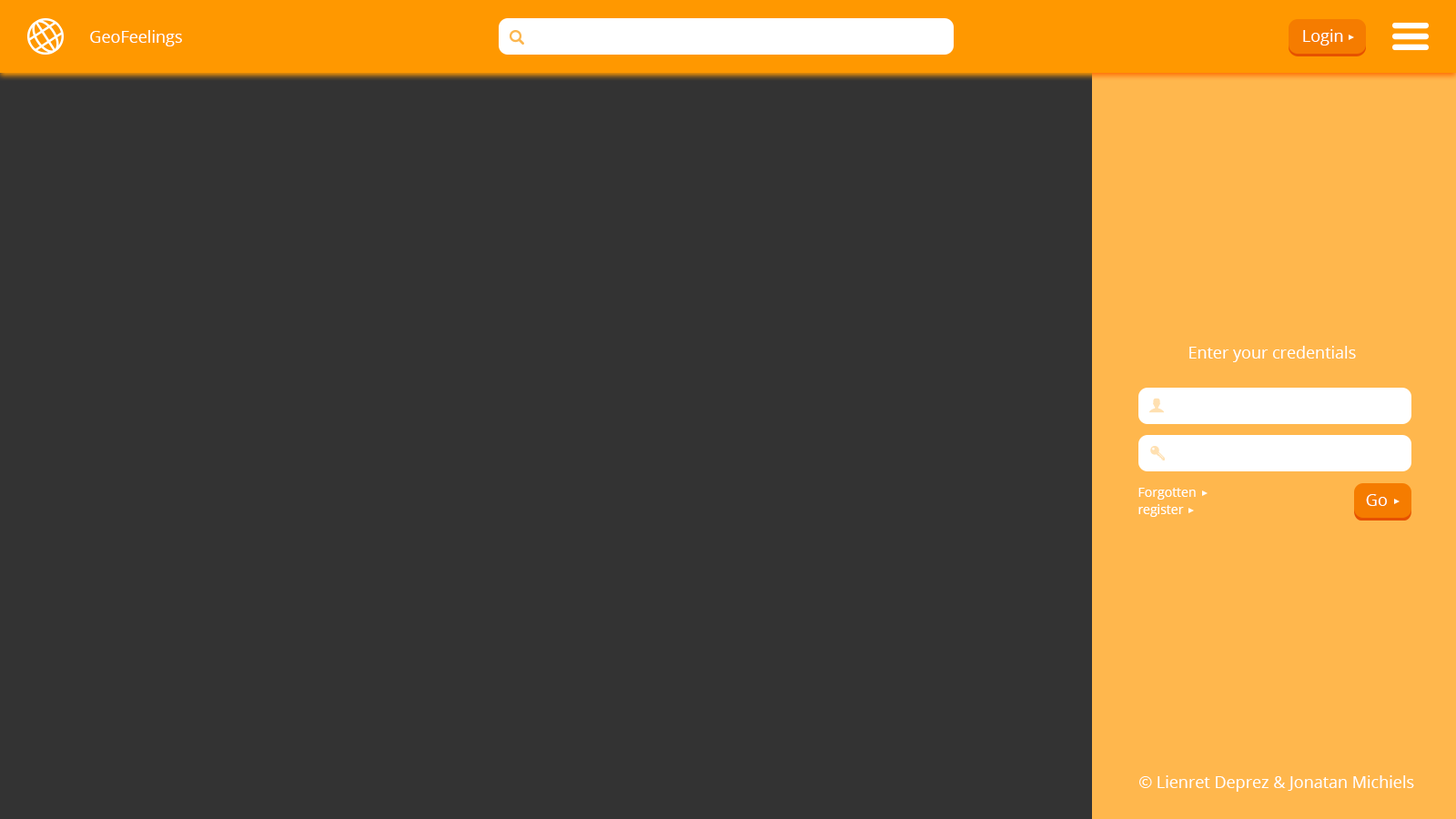
<style>
.page{position:relative;width:1456px;height:819px;background:#333333}
.page>*{position:absolute;margin:0}
.t1{font:16.4px "OpenSans";color:#ffffff}
.t2{font:12.7px "OpenSans";color:#ffffff}
</style>
<div class="page">
<p class="t1" style="left:1303px;top:29px;width:40px;height:16px">Login</p>
<p class="t1" style="left:90px;top:30px;width:92px;height:16px">GeoFeelings</p>
<p class="t1" style="left:1189px;top:346px;width:167px;height:16px">Enter your credentials</p>
<p class="t2" style="left:1138px;top:488px;width:58px;height:12px">Forgotten</p>
<p class="t1" style="left:1366px;top:494px;width:21px;height:12px">Go</p>
<p class="t2" style="left:1138px;top:504px;width:46px;height:13px">register</p>
<p class="t1" style="left:1139px;top:775px;width:275px;height:17px">© Lienret Deprez &amp; Jonatan Michiels</p>
</div>
